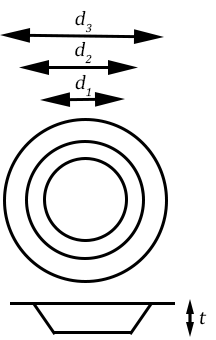
<style>
.page{position:relative;width:216px;height:340px;background:#ffffff}
.page>*{position:absolute;margin:0}
.t1{font:20px "CambriaMath";color:#000000;font-style:italic}
</style>
<div class="page">
<p class="t1" style="left:75px;top:10px;width:17px;height:23px">d3</p>
<p class="t1" style="left:75px;top:41px;width:17px;height:23px">d2</p>
<p class="t1" style="left:75px;top:74px;width:16px;height:23px">d1</p>
<p class="t1" style="left:199px;top:312px;width:8px;height:13px">t</p>
</div>
